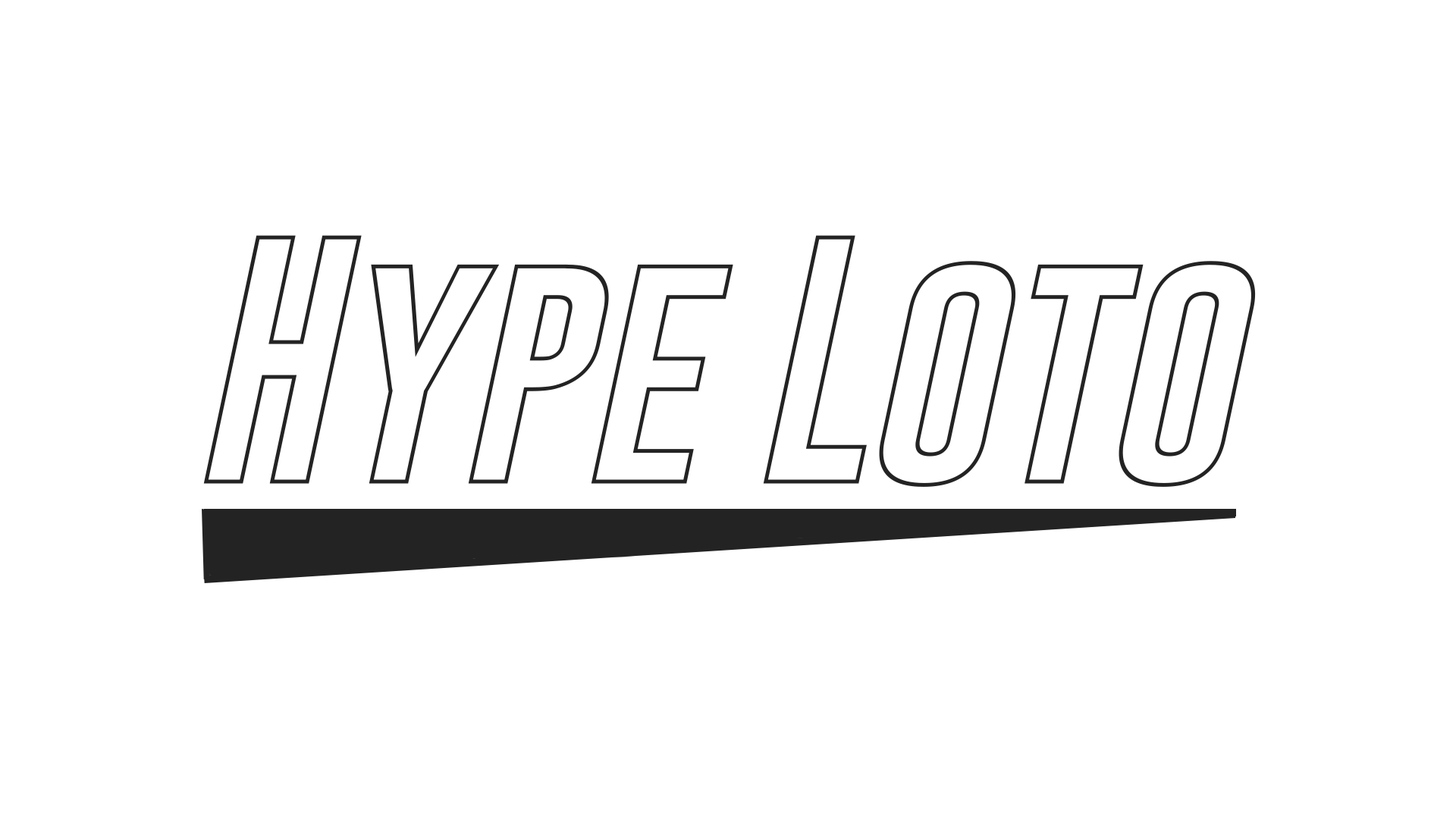
<style>
.page{position:relative;width:1456px;height:819px;background:#ffffff}
.page>*{position:absolute;margin:0}
.t1{font:254.7px "GoboldHollow-Italic";letter-spacing:-0.02em;color:#232323}
</style>
<div class="page">
<p class="t1" style="left:203px;top:235px;width:1053px;height:252px">Hype Loto</p>
</div>
